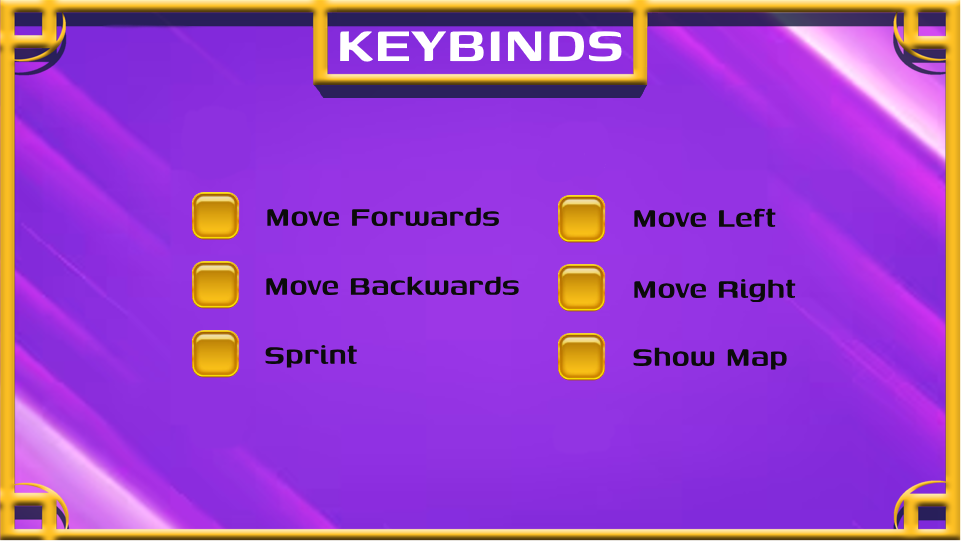
<style>
.page{position:relative;width:961px;height:541px}
.page>*{position:absolute;margin:0}
.t1{font:35.6px "Genos-SemiBold";color:#0b0b0b}
</style>
<div class="page">
<p class="t1" style="left:267px;top:207px;width:232px;height:19px">Move Forwards</p>
<p class="t1" style="left:634px;top:208px;width:142px;height:19px">Move Left</p>
<p class="t1" style="left:266px;top:276px;width:253px;height:19px">Move Backwards</p>
<p class="t1" style="left:634px;top:279px;width:162px;height:23px">Move Right</p>
<p class="t1" style="left:265px;top:345px;width:92px;height:23px">Sprint</p>
<p class="t1" style="left:633px;top:347px;width:154px;height:23px">Show Map</p>
</div>
